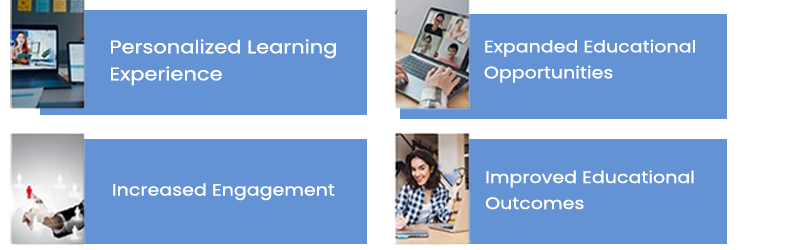
<style>
.page{position:relative;width:800px;height:250px;background:#6393d5}
.page>*{position:absolute;margin:0}
.t1{font:31.3px/27px "Poppins-Regular";color:#ffffff;scale:1.15 1}
.t2{font:28.4px/26px "Poppins-Regular";color:#ffffff;scale:1.15 1}
.t3{font:28.4px "Poppins-Regular";color:#ffffff;scale:1.15 1}
</style>
<div class="page">
<p class="t1" style="left:111px;top:39px;width:225px;height:47px">Personalized Learning <br>Experience</p>
<p class="t2" style="left:484px;top:39px;width:211px;height:44px">Expanded Educational<br>Opportunities</p>
<p class="t2" style="left:485px;top:170px;width:209px;height:40px">Improved Educational<br>Outcomes</p>
<p class="t3" style="left:113px;top:183px;width:222px;height:18px">Increased Engagement</p>
</div>
